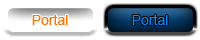
<style>
.page{position:relative;width:200px;height:40px;background:#ffffff}
.page>*{position:absolute;margin:0}
.t1{font:14px "ArialMT";color:#f97505}
.t2{font:14px "ArialMT";color:#068afa}
</style>
<div class="page">
<p class="t1" style="left:32px;top:14px;width:36px;height:11px">Portal</p>
<p class="t2" style="left:132px;top:14px;width:36px;height:11px">Portal</p>
</div>
